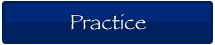
<style>
.page{position:relative;width:215px;height:45px;background:#002160}
.page>*{position:absolute;margin:0}
.t1{font:21.3px "Papyrus";color:#ffffff}
</style>
<div class="page">
<p class="t1" style="left:71px;top:14px;width:75px;height:16px">Practice</p>
</div>
